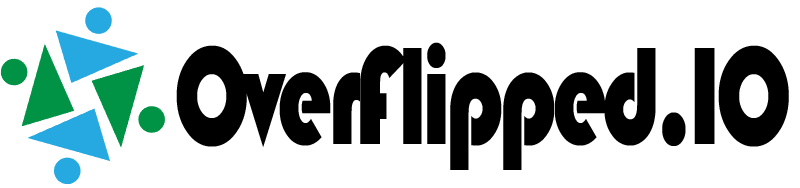
<style>
.page{position:relative;width:800px;height:188px;background:#ffffff}
.page>*{position:absolute;margin:0}
.t1{font:144px "Bauhaus93";letter-spacing:-0.05em;color:#000000;scale:0.69 1}
</style>
<div class="page">
<p class="t1" style="left:176px;top:42px;width:613px;height:128px">OverFlipped.IO</p>
</div>
